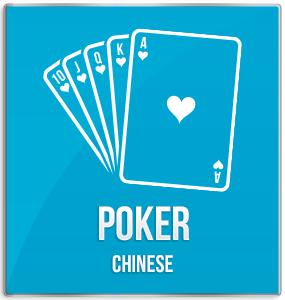
<style>
.page{position:relative;width:285px;height:300px}
.page>*{position:absolute;margin:0}
.t1{font:48px "BebasNeueBold";color:#ffffff;text-transform:uppercase}
.t2{font:24px "BebasNeueBold";color:#ffffff}
</style>
<div class="page">
<p class="t1" style="left:99px;top:206px;width:91px;height:35px">poker</p>
<p class="t2" style="left:112px;top:255px;width:61px;height:18px">chinese</p>
</div>
